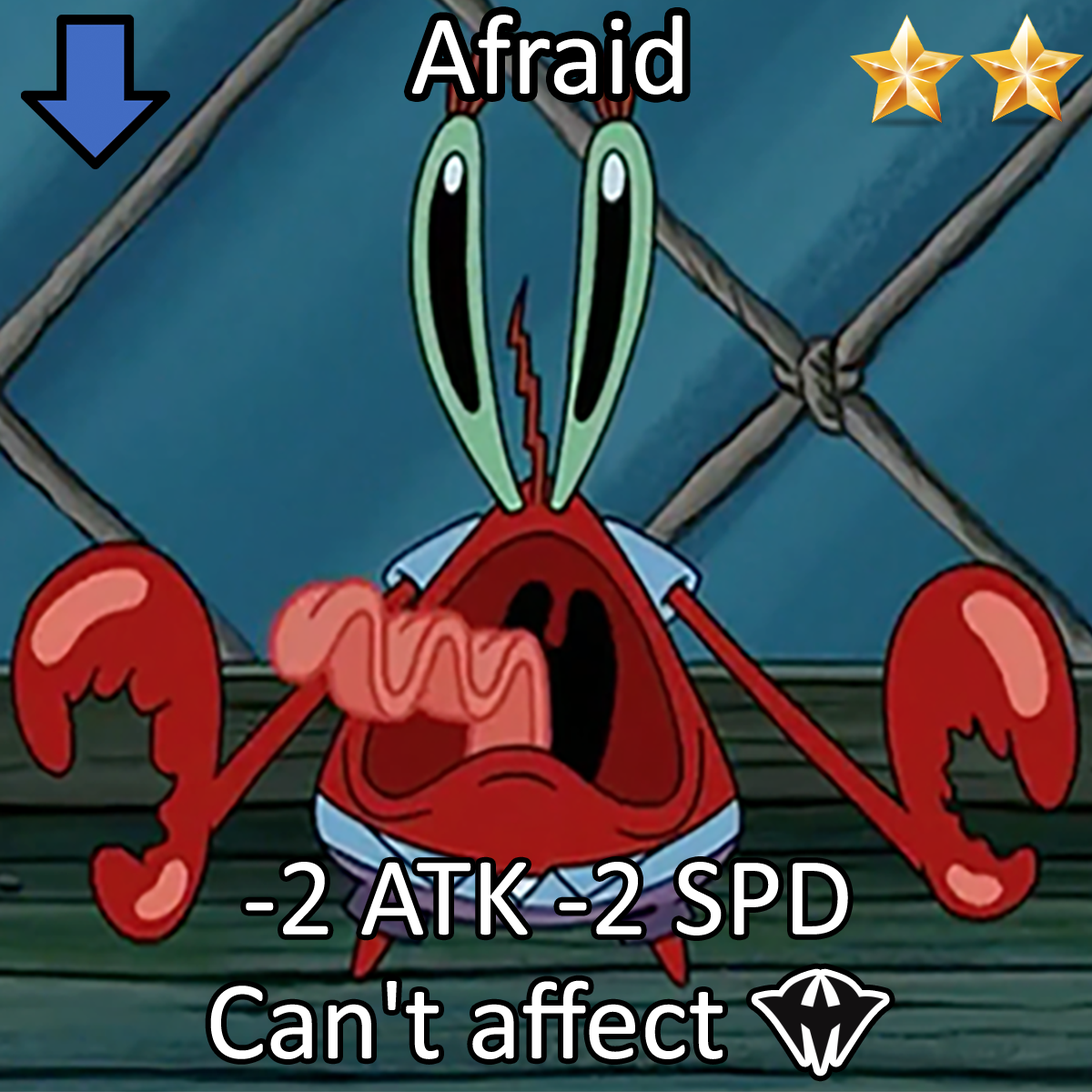
<style>
.page{position:relative;width:1092px;height:1092px}
.page>*{position:absolute;margin:0}
.t1{font:196.6px "Calibri";color:#ffffff}
.t2{font:193.8px/123.8px "Calibri";color:#ffffff}
.t3{font:160.8px/123.8px "stoogedings-Regular";color:#ffffff}
</style>
<div class="page">
<p class="t1" style="left:411px;top:15px;width:271px;height:80px">Afraid</p>
<p class="t2" style="left:210px;top:862px;width:680px;height:215px;text-align:center">-2 ATK -2 SPD<br>Can't affect <span class="t3">[dark:sticker]</span></p>
</div>
